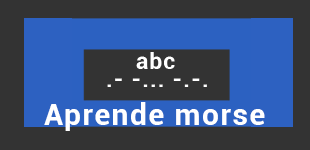
<style>
.page{position:relative;width:310px;height:150px;background:#333333}
.page>*{position:absolute;margin:0}
.t1{font:22.2px "Roboto-Bold";letter-spacing:0.05em;color:#ffffff}
.t2{font:30px "Roboto-Bold";letter-spacing:0.05em;color:#ffffff}
</style>
<div class="page">
<p class="t1" style="left:136px;top:52px;width:39px;height:17px">abc</p>
<p class="t2" style="left:44px;top:102px;width:221px;height:29px">Aprende morse</p>
</div>
